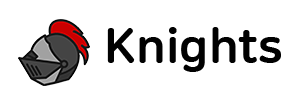
<style>
.page{position:relative;width:300px;height:100px;background:#ffffff}
.page>*{position:absolute;margin:0}
.t1{font:48px "NanumSquareRoundEB";color:#010101}
</style>
<div class="page">
<p class="t1" style="left:107px;top:27px;width:174px;height:45px">Knights</p>
</div>
